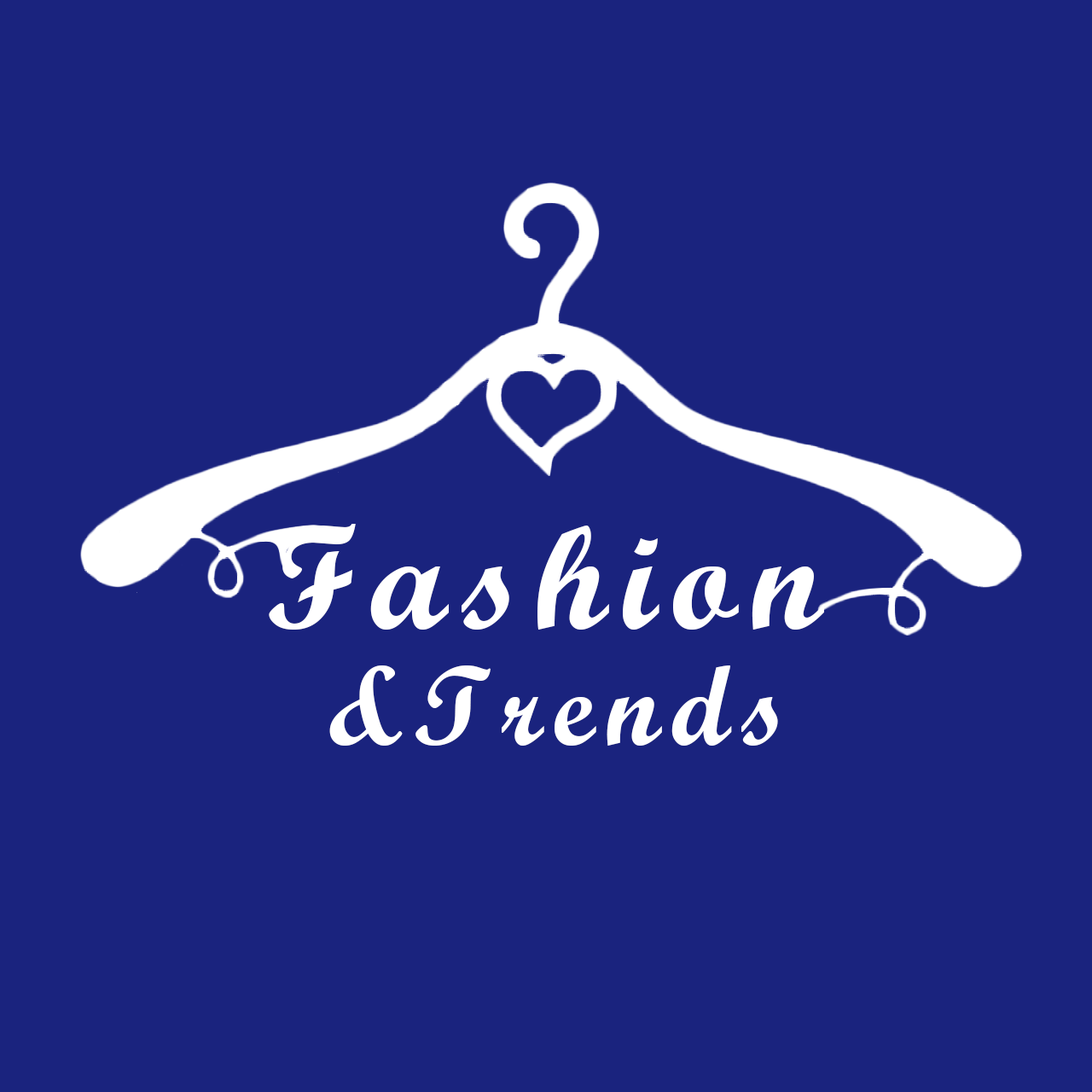
<style>
.page{position:relative;width:1092px;height:1092px;background:#1a237e}
.page>*{position:absolute;margin:0}
.t1{font:147.6px/57.6px "ScriptMTBold";letter-spacing:0.1em;color:#ffffff}
.t2{font:112.6px/57.6px "ScriptMTBold";letter-spacing:0.1em;color:#ffffff}
</style>
<div class="page">
<p class="t1" style="left:269px;top:524px;width:555px;height:222px">Fashion <br><br> <span class="t2">&amp;Trends</span></p>
</div>
